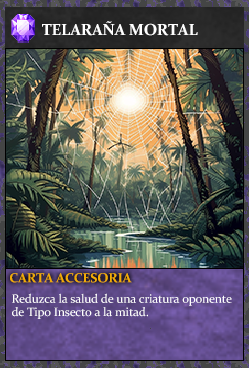
<style>
.page{position:relative;width:249px;height:368px}
.page>*{position:absolute;margin:0}
.t1{font:16px "Constantia-Bold";letter-spacing:-0.02em;color:#ffffff}
.t2{font:13.3px "Constantia-Bold";letter-spacing:-0.02em;color:#f2ac05}
.t3{font:12.3px/13.3px "Constantia";letter-spacing:-0.02em;color:#ffffff}
</style>
<div class="page">
<p class="t1" style="left:42px;top:21px;width:156px;height:15px">TELARAÑA MORTAL</p>
<p class="t2" style="left:10px;top:273px;width:122px;height:10px">CARTA ACCESORIA</p>
<p class="t3" style="left:12px;top:293px;width:220px;height:26px">Reduzca la salud de una criatura oponente<br>de Tipo Insecto a la mitad.</p>
</div>
